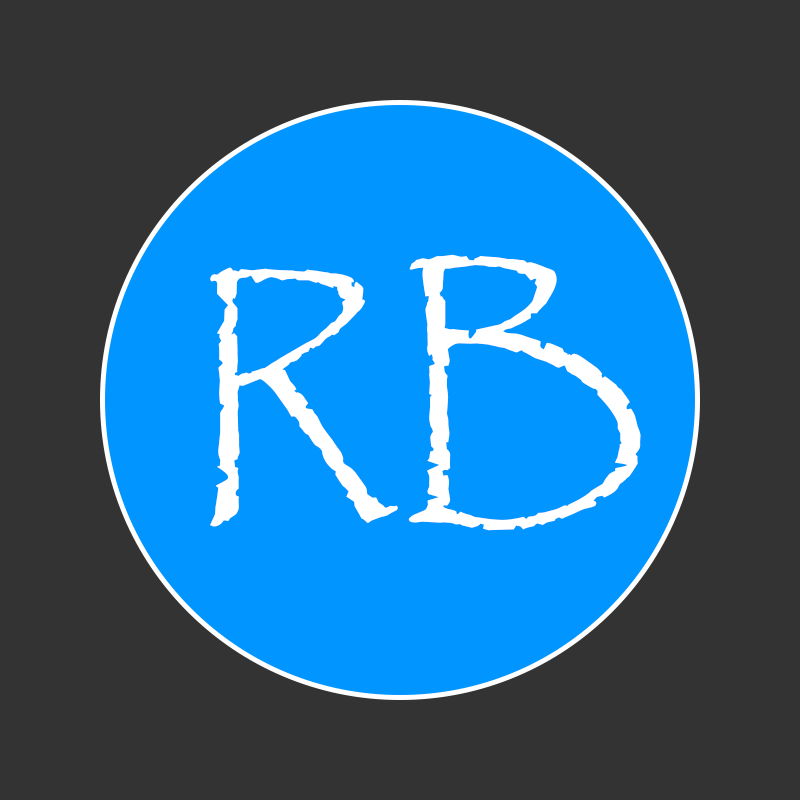
<style>
.page{position:relative;width:800px;height:800px;background:#333333}
.page>*{position:absolute;margin:0}
.t1{font:283.4px "Papyrus-Regular";color:#ffffff;scale:0.93 1}
</style>
<div class="page">
<p class="t1" style="left:210px;top:254px;width:431px;height:277px">RB</p>
</div>
